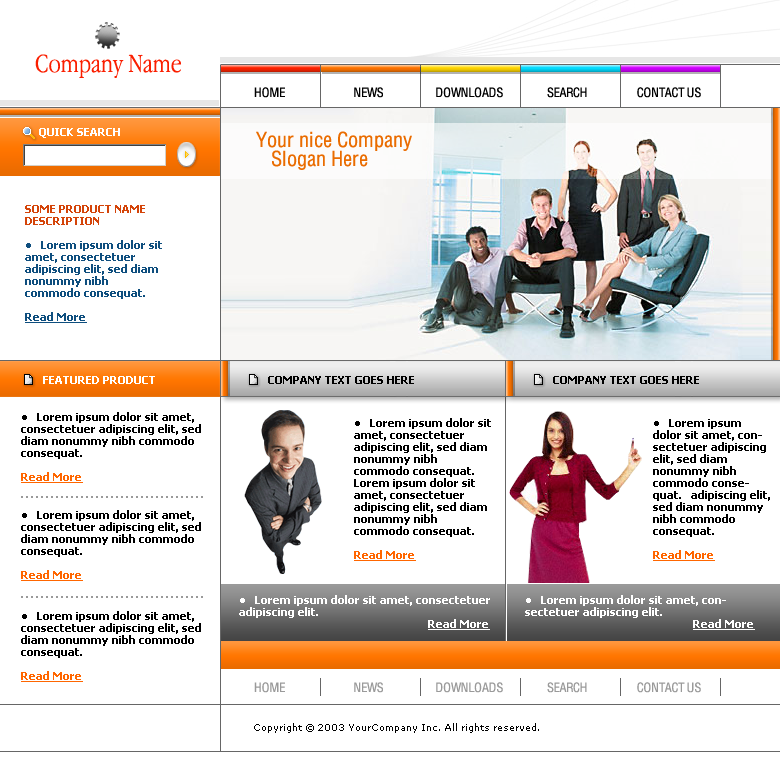
<style>
.page{position:relative;width:780px;height:772px;background:#ffffff}
.page>*{position:absolute;margin:0}
.t1{font:27px "AppleGaramondLight";color:#fa1e00}
.t2{font:13px "HeliosCond";letter-spacing:-0.02em;color:#000000}
.t3{font:11px "Tahoma-Bold";color:#ffffff}
.t4{font:21px/19px "HeliosCond";color:#ea6c00}
.t5{font:11px/12px "Tahoma-Bold";color:#0e4e7e}
.t6{font:11px/12px "Tahoma-Bold";color:#d44409}
.t7{font:11px/12px "Tahoma";color:#0e4e7e}
.t8{font:11px/12px "Tahoma-Bold";color:#0e4e7e;text-decoration:underline}
.t9{font:11px "Tahoma-Bold";color:#000000}
.t10{font:11px/12px "Tahoma-Bold";color:#000000}
.t11{font:11px/12px "Tahoma";color:#000000}
.t12{font:11px/12px "Tahoma-Bold";color:#ff6600;text-decoration:underline}
.t13{font:11px/12px "Tahoma-Bold";color:#ffffff}
.t14{font:11px/12px "Tahoma";color:#ffffff}
.t15{font:11px/12px "Tahoma-Bold";color:#ffffff;text-decoration:underline}
.t16{font:13px "HeliosCond";letter-spacing:-0.02em;color:#9a9a9a}
.t17{font:9px "Verdana";color:#000000}
</style>
<div class="page">
<p class="t1" style="left:35px;top:54px;width:146px;height:24px">Company Name</p>
<p class="t2" style="left:254px;top:87px;width:447px;height:11px">HOME                         NEWS                   DOWNLOADS                SEARCH                  CONTACT US</p>
<p class="t3" style="left:39px;top:128px;width:81px;height:10px">QUICK SEARCH</p>
<p class="t4" style="left:256px;top:131px;width:156px;height:39px">Your nice Company<br>   Slogan Here</p>
<p class="t5" style="left:25px;top:205px;width:137px;height:118px"><span class="t6">SOME PRODUCT NAME DESCRIPTION<br></span><span class="t7"><br>●   </span>Lorem ipsum dolor sit amet, consectetuer adipiscing elit, sed diam nonummy nibh commodo consequat.<br><br><span class="t8">Read More</span></p>
<p class="t3" style="left:43px;top:376px;width:112px;height:8px">FEATURED PRODUCT</p>
<p class="t9" style="left:268px;top:376px;width:146px;height:8px">COMPANY TEXT GOES HERE</p>
<p class="t9" style="left:553px;top:376px;width:146px;height:8px">COMPANY TEXT GOES HERE</p>
<p class="t10" style="left:21px;top:412px;width:180px;height:71px"><span class="t11">●   </span>Lorem ipsum dolor sit amet, consectetuer adipiscing elit, sed diam nonummy nibh commodo consequat.<br><br><span class="t12">Read More</span></p>
<p class="t10" style="left:354px;top:418px;width:137px;height:143px"><span class="t11">●   </span>Lorem ipsum dolor sit amet, consectetuer adipiscing elit, sed diam nonummy nibh commodo consequat.  Lorem ipsum dolor sit amet, consectetuer adipiscing elit, sed diam nonummy nibh commodo consequat.<br><br><span class="t12">Read More</span></p>
<p class="t10" style="left:653px;top:419px;width:117px;height:142px"><span class="t11">●   </span>Lorem ipsum dolor sit amet, consectetuer adipiscing elit, sed diam nonummy nibh commodo consequat.   adipiscing elit, sed diam nonummy nibh commodo consequat.<br><br><span class="t12">Read More</span></p>
<p class="t10" style="left:21px;top:510px;width:180px;height:71px"><span class="t11">●   </span>Lorem ipsum dolor sit amet, consectetuer adipiscing elit, sed diam nonummy nibh commodo consequat.<br><br><span class="t12">Read More</span></p>
<p class="t13" style="left:239px;top:595px;width:251px;height:35px"><span class="t14">●   </span>Lorem ipsum dolor sit amet, consectetuer adipiscing elit.<br>                                                               <span class="t15">Read More</span></p>
<p class="t13" style="left:525px;top:595px;width:230px;height:35px"><span class="t14">●   </span>Lorem ipsum dolor sit amet, consectetuer adipiscing elit.<br>                                                        <span class="t15">Read More</span></p>
<p class="t10" style="left:21px;top:611px;width:180px;height:71px"><span class="t11">●   </span>Lorem ipsum dolor sit amet, consectetuer adipiscing elit, sed diam nonummy nibh commodo consequat.<br><br><span class="t12">Read More</span></p>
<p class="t16" style="left:254px;top:682px;width:447px;height:11px">HOME                         NEWS                   DOWNLOADS                SEARCH                  CONTACT US</p>
<p class="t17" style="left:254px;top:723px;width:285px;height:10px">Copyright © 2003 YourCompany Inc. All rights reserved.</p>
</div>
